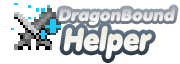
<style>
.page{position:relative;width:180px;height:64px;background:#ffffff}
.page>*{position:absolute;margin:0}
.t1{font:17px "Anja-Eliane-Nornal";color:#e5e5e5;font-style:italic}
.t2{font:31.7px "Anja-Eliane-Nornal";color:#f6f4ed;font-style:italic;scale:0.82 1}
</style>
<div class="page">
<p class="t1" style="left:58px;top:7px;width:118px;height:19px">DragonBound</p>
<p class="t2" style="left:63px;top:26px;width:89px;height:33px">Helper</p>
</div>
